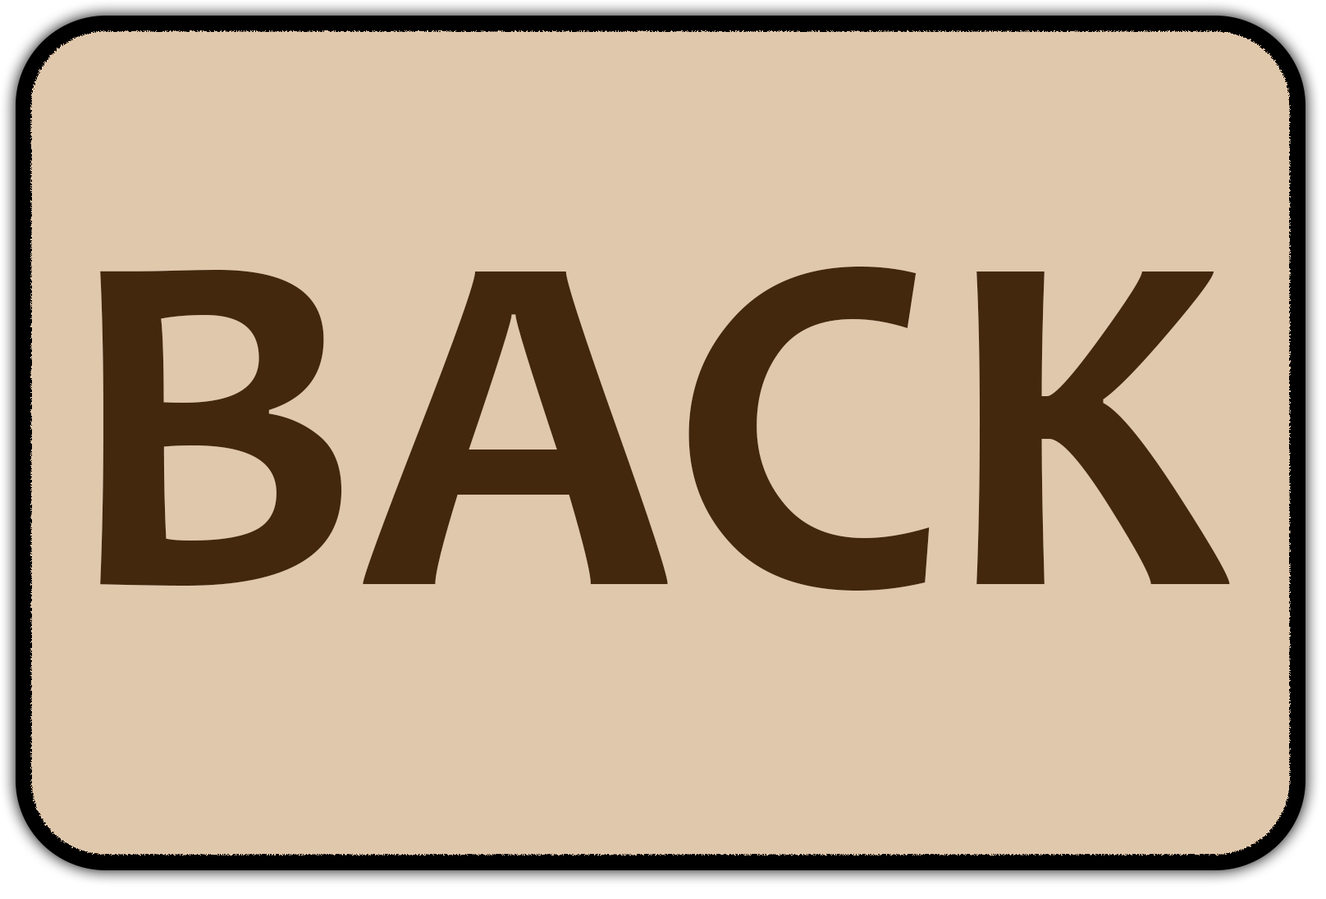
<style>
.page{position:relative;width:1326px;height:899px;background:#e0c8ad}
.page>*{position:absolute;margin:0}
.t1{font:492.3px "Candara-Bold";color:#43280d}
</style>
<div class="page">
<p class="t1" style="left:100px;top:267px;width:1130px;height:324px">BACK</p>
</div>
